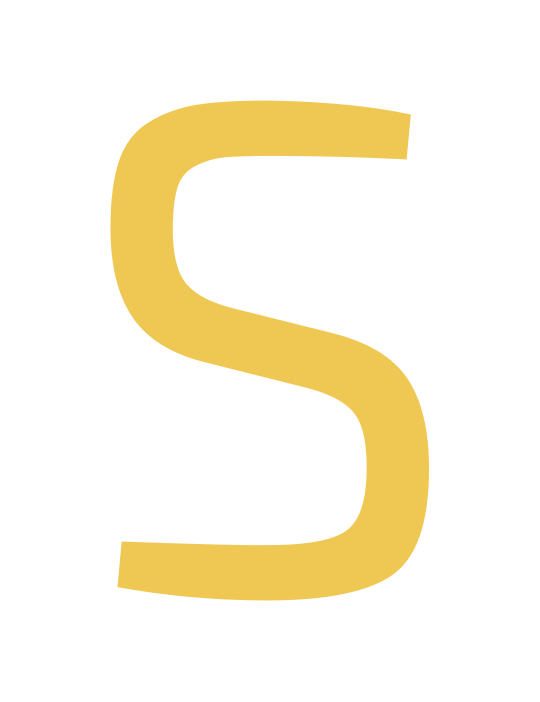
<style>
.page{position:relative;width:540px;height:702px;background:#ffffff}
.page>*{position:absolute;margin:0}
.t1{font:700px "Exo2-Regular";color:#efc854}
</style>
<div class="page">
<p class="t1" style="left:110px;top:100px;width:319px;height:501px">S</p>
</div>
